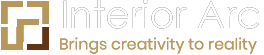
<style>
.page{position:relative;width:264px;height:55px;background:#ffffff}
.page>*{position:absolute;margin:0}
.t1{font:15.6px "Poppins-Regular";color:#b9975b}
</style>
<div class="page">
<p class="t1" style="left:60px;top:37px;width:197px;height:17px">Brings creativity to reality</p>
<p class="t1" style="left:60px;top:37px;width:197px;height:17px">Brings creativity to reality</p>
</div>
